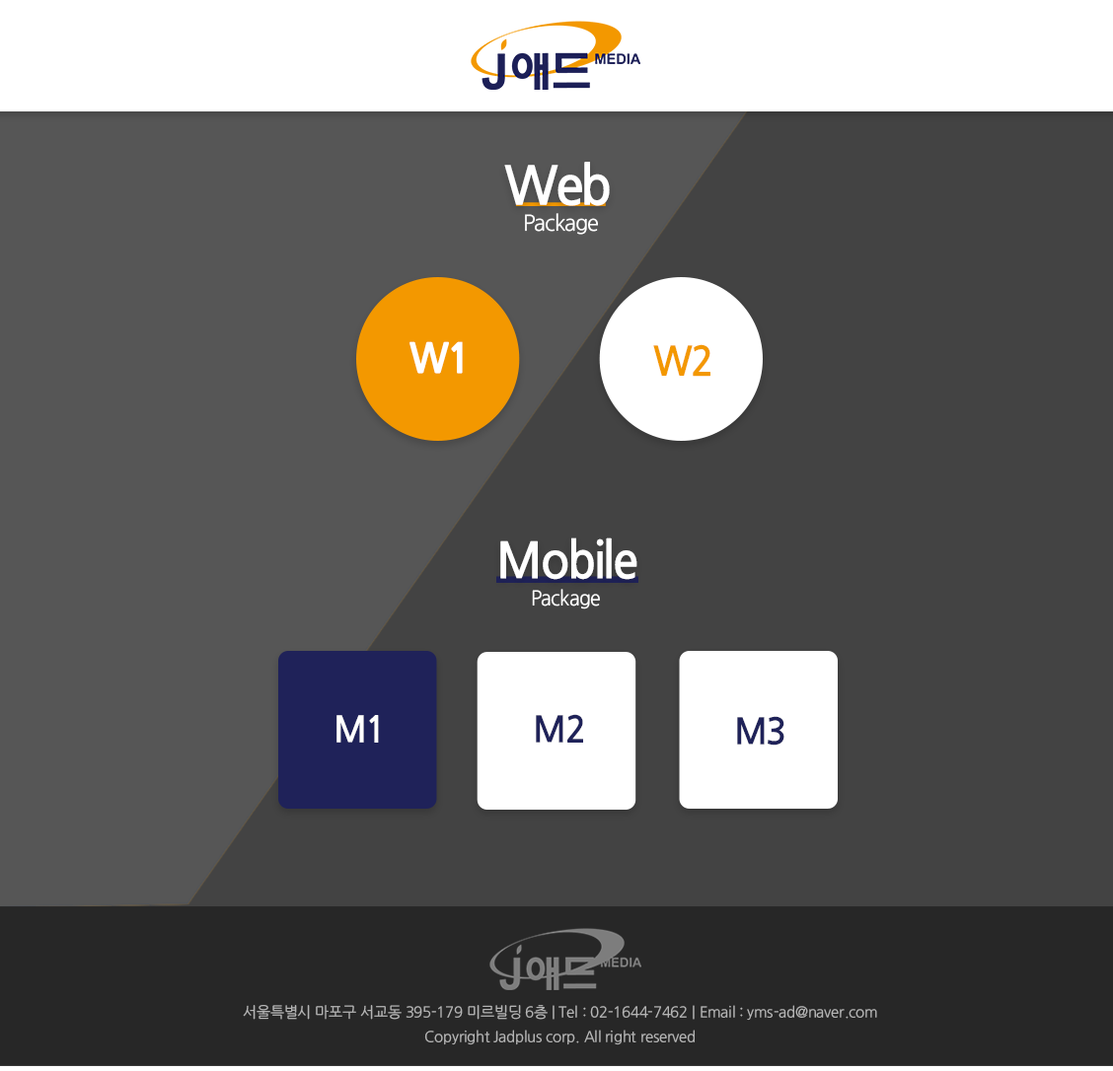
<style>
.page{position:relative;width:1113px;height:1071px;background:#434343}
.page>*{position:absolute;margin:0}
.t1{font:52.9px "NanumGothicOTFBold";letter-spacing:-0.065em;color:#ffffff}
.t2{font:21.7px "NanumGothicOTF";letter-spacing:-0.045em;color:#ffffff}
.t3{font:40.3px "NanumGothicOTFExtraBold";letter-spacing:-0.045em;color:#ffffff;scale:0.95 1}
.t4{font:40.3px "NanumGothicOTFBold";letter-spacing:-0.045em;color:#f39800;scale:0.95 1}
.t5{font:49.4px "NanumGothicOTFBold";letter-spacing:-0.045em;color:#ffffff;scale:0.96 1}
.t6{font:20.3px "NanumGothicOTF";letter-spacing:-0.03em;color:#ffffff;scale:0.95 1}
.t7{font:36.3px "NanumGothicOTFBold";letter-spacing:-0.045em;color:#ffffff;scale:0.96 1}
.t8{font:36.3px "NanumGothicOTFBold";letter-spacing:-0.045em;color:#1f2259;scale:0.96 1}
.t9{font:14.8px/24.7px "NanumGothicOTF";letter-spacing:-0.015em;color:#b4b4b4}
</style>
<div class="page">
<p class="t1" style="left:504px;top:162px;width:106px;height:44px">Web</p>
<p class="t2" style="left:525px;top:213px;width:73px;height:22px">Package</p>
<p class="t3" style="left:409px;top:341px;width:54px;height:33px">W1</p>
<p class="t4" style="left:653px;top:344px;width:57px;height:33px">W2</p>
<p class="t5" style="left:500px;top:538px;width:137px;height:42px">Mobile</p>
<p class="t6" style="left:532px;top:589px;width:68px;height:21px">Package</p>
<p class="t7" style="left:336px;top:715px;width:43px;height:28px">M1</p>
<p class="t8" style="left:536px;top:714px;width:47px;height:29px">M2</p>
<p class="t8" style="left:737px;top:716px;width:47px;height:30px">M3</p>
<p class="t9" style="left:243px;top:1005px;width:634px;height:41px;text-align:center">서울특별시 마포구 서교동 395-179 미르빌딩 6층 | Tel : 02-1644-7462 | Email : yms-ad@naver.com<br>Copyright Jadplus corp. All right reserved</p>
</div>
